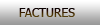
<style>
.page{position:relative;width:100px;height:25px}
.page>*{position:absolute;margin:0}
.t1{font:12px "Tahoma"}
</style>
<div class="page">
<p class="t1" style="left:19px;top:8px;width:56px;height:9px">FACTURES</p>
</div>
